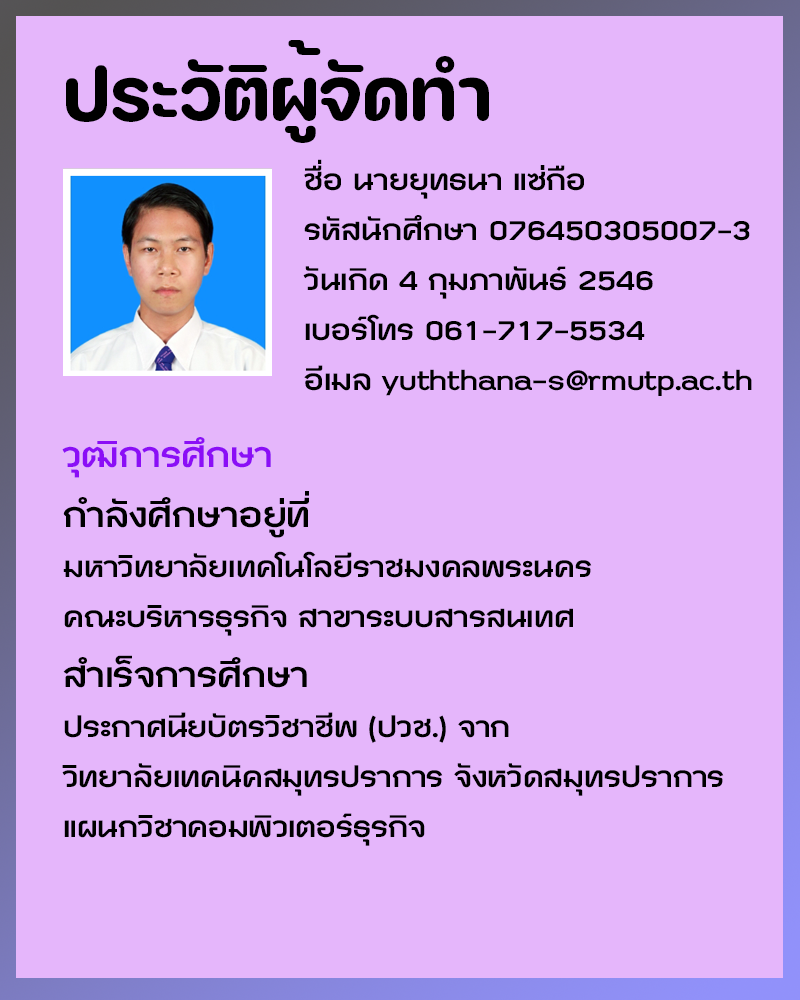
<style>
.page{position:relative;width:800px;height:1000px;background:#e5b6fb}
.page>*{position:absolute;margin:0}
.t1{font:75px "FCSubjectRoundedNoncml-Bold";color:#000000}
.t2{font:41.7px "DBChidlomX-Bold";color:#000000}
.t3{font:50px "DBChidlomX-Bold";color:#8b0ef6}
.t4{font:50px "DBChidlomX-Bold";color:#000000}
</style>
<div class="page">
<p class="t1" style="left:66px;top:40px;width:423px;height:103px">ประวัติผู้จัดทำ</p>
<p class="t2" style="left:303px;top:159px;width:449px;height:237px">ชื่อ นายยุทธนา แซ่กือ<br>รหัสนักศึกษา 076450305007-3<br>วันเกิด 4 กุมภาพันธ์ 2546<br>เบอร์โทร 061-717-5534<br>อีเมล yuththana-s@rmutp.ac.th</p>
<p class="t2" style="left:62px;top:437px;width:662px;height:409px"><span class="t3">วุฒิการศึกษา<br></span><span class="t4">กำลังศึกษาอยู่ที่ <br></span>มหาวิทยาลัยเทคโนโลยีราชมงคลพระนคร <br>คณะบริหารธุรกิจ สาขาระบบสารสนเทศ<br><span class="t4">สำเร็จการศึกษา</span> <br>ประกาศนียบัตรวิชาชีพ (ปวช.) จาก<br>วิทยาลัยเทคนิคสมุทรปราการ จังหวัดสมุทรปราการ<br>แผนกวิชาคอมพิวเตอร์ธุรกิจ</p>
</div>
